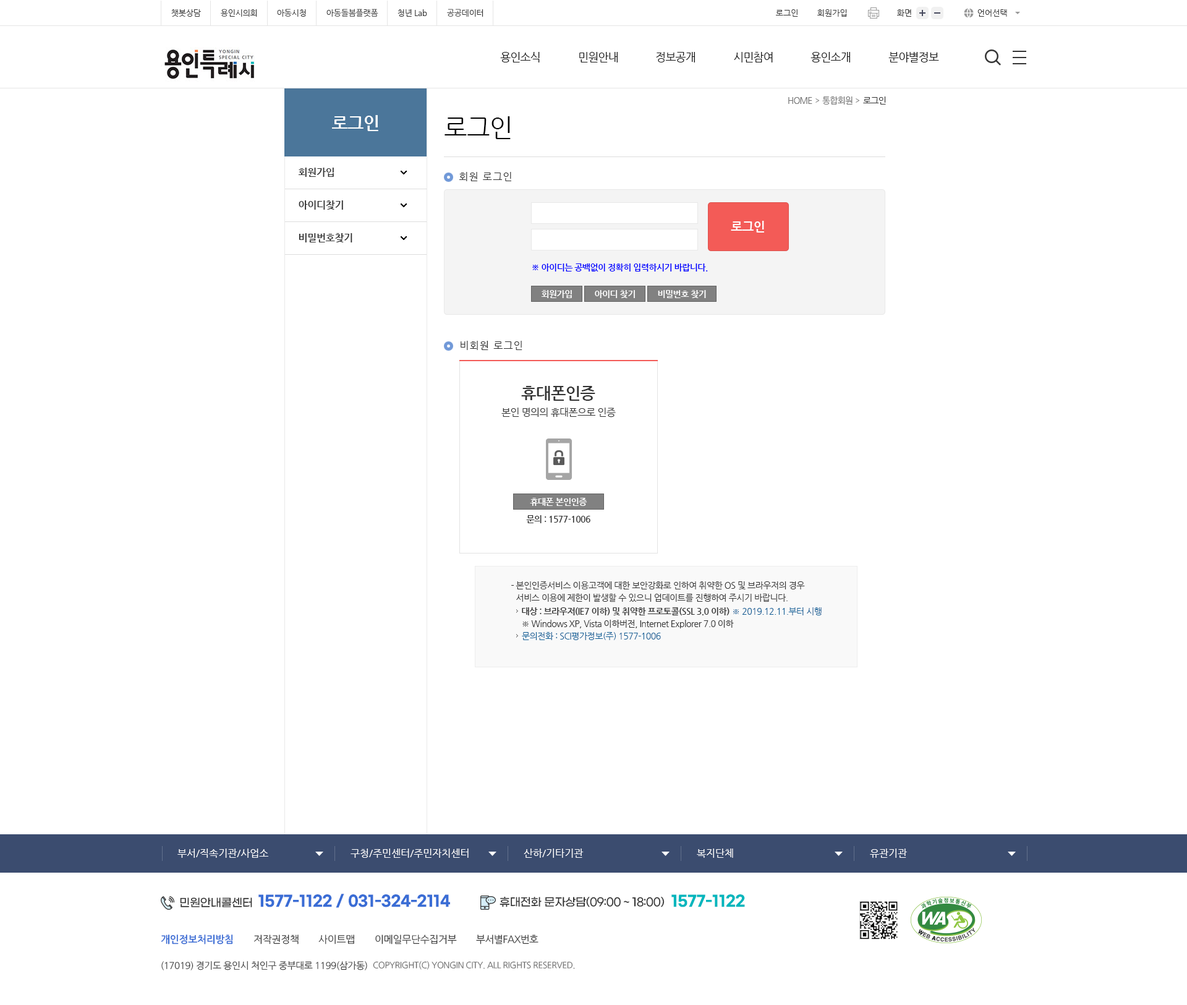
<style>
.page{position:relative;width:1187px;height:1005px;background:#ffffff}
.page>*{position:absolute;margin:0}
.t1{font:8px "NanumGothic";letter-spacing:-0.02em;color:#353535}
.t2{font:8px "NanumGothic";color:#353535}
.t3{font:11.1px "NanumGothic";letter-spacing:-0.04em;color:#1a1a1a}
.t4{font:8.7px "NanumGothic";letter-spacing:-0.06em;color:#6f6f6f}
.t5{font:8.7px "NanumGothic";letter-spacing:-0.06em;color:#333333}
.t6{font:17.3px "NanumGothicBold";letter-spacing:-0.02em;color:#ffffff}
.t7{font:24.7px "NanumGothic";letter-spacing:-0.02em;color:#000000}
.t8{font:9.9px "NanumGothicBold";letter-spacing:-0.02em;color:#313131}
.t9{font:9.9px "NanumGothic";letter-spacing:0.08em;color:#333333}
.t10{font:12.4px "NanumGothicBold";letter-spacing:-0.02em;color:#ffffff}
.t11{font:8.7px "NanumGothicBold";letter-spacing:-0.04em;color:#0000ff}
.t12{font:8.7px "NanumGothicBold";letter-spacing:-0.04em;color:#ffffff}
.t13{font:16.1px "NanumGothicBold";letter-spacing:-0.02em;color:#333333}
.t14{font:9.9px "NanumGothic";letter-spacing:-0.04em;color:#333333}
.t15{font:8.7px "NanumGothicBold";letter-spacing:-0.04em;color:#333333}
.t16{font:8.7px/12.4px "NanumGothic";letter-spacing:-0.035em;color:#333333}
.t17{font:8.7px "NanumGothicBold";letter-spacing:-0.035em;color:#333333}
.t18{font:8.7px "NanumGothic";letter-spacing:-0.035em;color:#105f97}
.t19{font:8.7px "NanumGothic";letter-spacing:-0.035em;color:#333333}
.t20{font:9.9px "NanumGothic";color:#ffffff}
.t21{font:14.9px "GmarketSansTTFBold";letter-spacing:-0.02em;color:#3a6dd5}
.t22{font:14.9px "GmarketSansTTFBold";letter-spacing:-0.02em;color:#00b6bd}
.t23{font:11.2px "GmarketSansTTFMedium";letter-spacing:-0.02em;color:#353535}
.t24{font:11.2px "GmarketSansTTFMedium";letter-spacing:-0.04em;color:#353535}
.t25{font:9.9px "NanumGothicBold";letter-spacing:-0.02em;color:#3a6dd5}
.t26{font:9.9px "NanumGothic";letter-spacing:-0.02em;color:#353535}
.t27{font:9.9px "NanumGothic";letter-spacing:-0.04em;color:#353535}
.t28{font:9.3px "NanumGothic";letter-spacing:-0.03em;color:#353535}
.t29{font:8.7px "NanumGothic";letter-spacing:-0.04em;color:#666666}
</style>
<div class="page">
<p class="t1" style="left:171px;top:9px;width:30px;height:8px">챗봇상담</p>
<p class="t1" style="left:221px;top:9px;width:36px;height:8px">용인시의회</p>
<p class="t1" style="left:277px;top:9px;width:29px;height:8px">아동시청</p>
<p class="t1" style="left:326px;top:9px;width:52px;height:8px">아동돌봄플랫폼</p>
<p class="t1" style="left:398px;top:9px;width:29px;height:8px">청년 Lab</p>
<p class="t1" style="left:447px;top:9px;width:36px;height:8px">공공데이터</p>
<p class="t2" style="left:776px;top:9px;width:22px;height:8px">로그인</p>
<p class="t2" style="left:817px;top:9px;width:30px;height:8px">회원가입</p>
<p class="t2" style="left:897px;top:9px;width:14px;height:8px">화면</p>
<p class="t2" style="left:977px;top:9px;width:30px;height:8px">언어선택</p>
<p class="t3" style="left:500px;top:52px;width:40px;height:10px">용인소식</p>
<p class="t3" style="left:579px;top:52px;width:39px;height:10px">민원안내</p>
<p class="t3" style="left:656px;top:52px;width:39px;height:10px">정보공개</p>
<p class="t3" style="left:734px;top:52px;width:39px;height:10px">시민참여</p>
<p class="t3" style="left:810px;top:52px;width:40px;height:10px">용인소개</p>
<p class="t3" style="left:888px;top:52px;width:51px;height:10px">분야별정보</p>
<p class="t4" style="left:788px;top:97px;width:24px;height:7px">HOME</p>
<p class="t4" style="left:822px;top:96px;width:31px;height:9px">통합회원</p>
<p class="t5" style="left:863px;top:96px;width:23px;height:8px">로그인</p>
<p class="t6" style="left:332px;top:115px;width:46px;height:16px">로그인</p>
<p class="t7" style="left:444px;top:116px;width:67px;height:23px">로그인</p>
<p class="t8" style="left:298px;top:168px;width:36px;height:9px">회원가입</p>
<p class="t9" style="left:459px;top:172px;width:52px;height:9px">회원 로그인</p>
<p class="t8" style="left:299px;top:200px;width:44px;height:10px">아이디찾기</p>
<p class="t10" style="left:731px;top:221px;width:33px;height:11px">로그인</p>
<p class="t8" style="left:299px;top:233px;width:53px;height:9px">비밀번호찾기</p>
<p class="t11" style="left:532px;top:263px;width:176px;height:9px">※ 아이디는 공백없이 정확히 입력하시기 바랍니다.</p>
<p class="t12" style="left:541px;top:290px;width:31px;height:8px">회원가입</p>
<p class="t12" style="left:595px;top:290px;width:40px;height:8px">아이디 찾기</p>
<p class="t12" style="left:658px;top:290px;width:48px;height:8px">비밀번호 찾기</p>
<p class="t9" style="left:461px;top:341px;width:61px;height:9px">비회원 로그인</p>
<p class="t13" style="left:521px;top:386px;width:74px;height:15px">휴대폰인증</p>
<p class="t14" style="left:501px;top:407px;width:115px;height:10px">본인 명의의 휴대폰으로 인증</p>
<p class="t12" style="left:530px;top:497px;width:57px;height:9px">휴대폰 본인인증</p>
<p class="t15" style="left:526px;top:515px;width:64px;height:8px">문의 : 1577-1006</p>
<p class="t16" style="left:516px;top:581px;width:289px;height:21px">본인인증서비스 이용고객에 대한 보안강화로 인하여 취약한 OS 및 브라우저의 경우<br>서비스 이용에 제한이 발생할 수 있으니 업데이트를 진행하여 주시기 바랍니다.</p>
<p class="t17" style="left:522px;top:606px;width:207px;height:10px">대상 : 브라우저(IE7 이하) 및 취약한 프로토콜(SSL 3.0 이하)</p>
<p class="t18" style="left:733px;top:607px;width:89px;height:8px">※ 2019.12.11.부터 시행</p>
<p class="t19" style="left:522px;top:619px;width:212px;height:9px">※ Windows XP, Vista 이하버전, Internet Explorer 7.0 이하</p>
<p class="t18" style="left:522px;top:632px;width:139px;height:8px">문의전화 : SCI평가정보(주) 1577-1006</p>
<p class="t20" style="left:177px;top:848px;width:91px;height:9px">부서/직속기관/사업소</p>
<p class="t20" style="left:351px;top:848px;width:118px;height:9px">구청/주민센터/주민자치센터</p>
<p class="t20" style="left:524px;top:848px;width:60px;height:9px">산하/기타기관</p>
<p class="t20" style="left:697px;top:848px;width:36px;height:9px">복지단체</p>
<p class="t20" style="left:870px;top:848px;width:37px;height:9px">유관기관</p>
<p class="t21" style="left:258px;top:893px;width:192px;height:15px">1577-1122 / 031-324-2114</p>
<p class="t22" style="left:671px;top:894px;width:74px;height:13px">1577-1122</p>
<p class="t23" style="left:180px;top:897px;width:72px;height:10px">민원안내콜센터</p>
<p class="t24" style="left:500px;top:896px;width:165px;height:11px"><span class="t23">휴대전화 문자상담</span>(09:00 ~ 18:00)</p>
<p class="t25" style="left:161px;top:934px;width:72px;height:10px">개인정보처리방침</p>
<p class="t26" style="left:253px;top:934px;width:46px;height:10px">저작권정책</p>
<p class="t26" style="left:318px;top:934px;width:36px;height:10px">사이트맵</p>
<p class="t26" style="left:375px;top:934px;width:82px;height:10px">이메일무단수집거부</p>
<p class="t27" style="left:476px;top:934px;width:62px;height:10px">부서별FAX번호</p>
<p class="t28" style="left:161px;top:961px;width:206px;height:9px">(17019) 경기도 용인시 처인구 중부대로 1199(삼가동)</p>
<p class="t29" style="left:373px;top:960px;width:202px;height:9px">COPYRIGHT(C) YONGIN CITY. ALL RIGHTS RESERVED.</p>
</div>
